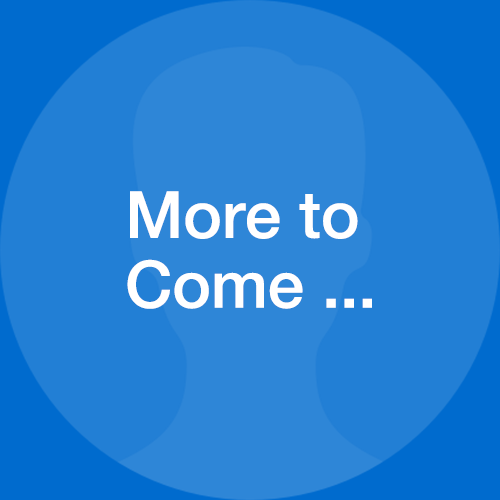
<style>
.page{position:relative;width:500px;height:500px;background:#227fd5}
.page>*{position:absolute;margin:0}
.t1{font:65.2px/69.7px "HelveticaNeue-Medium";color:#ffffff}
</style>
<div class="page">
<p class="t1" style="left:127px;top:191px;width:245px;height:118px">More to<br>Come ...</p>
</div>
